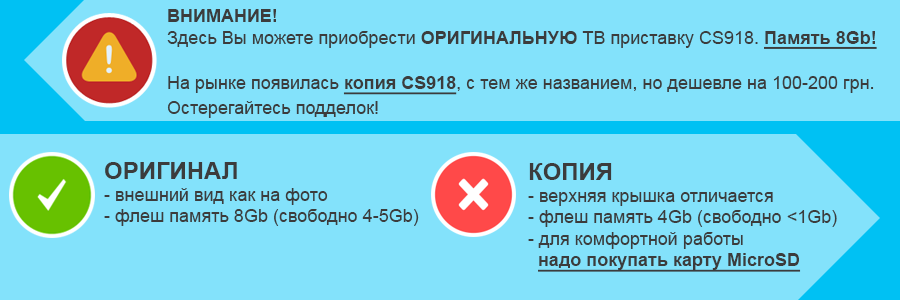
<style>
.page{position:relative;width:900px;height:300px;background:#83e2fb}
.page>*{position:absolute;margin:0}
.t1{font:18px "ArialMT";color:#3c3c3c}
.t2{font:18px "Arial-BoldMT";color:#3c3c3c}
.t3{font:18px "Arial-BoldMT";color:#3c3c3c;text-decoration:underline}
.t4{font:24px "Arial-BoldMT";color:#3c3c3c}
</style>
<div class="page">
<p class="t1" style="left:167px;top:9px;width:710px;height:40px"><span class="t2">ВНИМАНИЕ!<br></span>Здесь Вы можете приобрести <span class="t2">ОРИГИНАЛЬНУЮ</span> ТВ приставку CS918. <span class="t3">Память 8Gb!</span></p>
<p class="t1" style="left:168px;top:76px;width:706px;height:19px">На рынке появилась <span class="t3">копия CS918</span>, с тем же названием, но дешевле на 100-200 грн.</p>
<p class="t1" style="left:167px;top:101px;width:211px;height:17px"><span class="t2"><br></span>Остерегайтесь подделок!</p>
<p class="t1" style="left:104px;top:162px;width:315px;height:64px"><span class="t4">ОРИГИНАЛ<br></span>- внешний вид как на фото<br>- флеш память 8Gb (свободно 4-5Gb)</p>
<p class="t1" style="left:528px;top:163px;width:309px;height:109px"><span class="t4">КОПИЯ<br></span>- верхняя крышка отличается<br>- флеш память 4Gb (свободно &lt;1Gb)<br>- для комфортной работы <br>  <span class="t3">надо покупать карту MicroSD</span></p>
</div>
